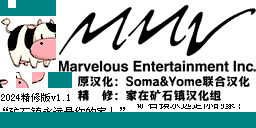
<style>
.page{position:relative;width:256px;height:128px;background:#ffffff}
.page>*{position:absolute;margin:0}
.t1{font:12px "MaokenZhuyuanTi-Regular";color:#000000}
.t2{font:10px "Small-SimSun";color:#000000}
.t3{font:11px "Small-SimSun"}
</style>
<div class="page">
<p class="t1" style="left:78px;top:76px;width:172px;height:11px">原汉化：Soma&amp;Yome联合汉化</p>
<p class="t1" style="left:78px;top:89px;width:143px;height:12px">精　修：家在矿石镇汉化组</p>
<p class="t2" style="left:1px;top:93px;width:69px;height:9px">2024精修版v1.1</p>
<p class="t3" style="left:131px;top:99px;width:122px;height:10px">“矿石镇永远是你的家！”</p>
<p class="t3" style="left:3px;top:107px;width:122px;height:10px">“矿石镇永远是你的家！”</p>
</div>
